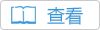
<style>
.page{position:relative;width:100px;height:30px;background:#ffffff}
.page>*{position:absolute;margin:0}
.t1{font:18px "MicrosoftYaHei";color:#3998d6}
</style>
<div class="page">
<p class="t1" style="left:47px;top:7px;width:36px;height:18px">查看</p>
</div>
